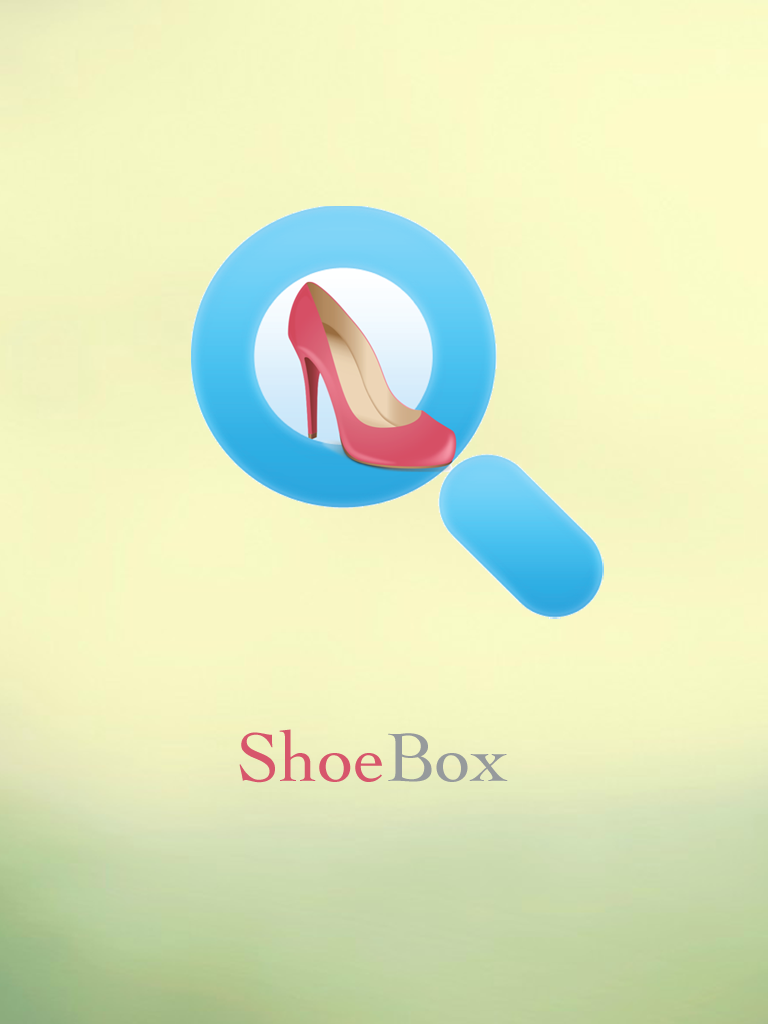
<style>
.page{position:relative;width:768px;height:1024px}
.page>*{position:absolute;margin:0}
.t1{font:72px "Cochin";color:#d7566c}
.t2{font:72px "Cochin";color:#969a9c}
</style>
<div class="page">
<p class="t1" style="left:239px;top:729px;width:269px;height:54px">Shoe<span class="t2">Box</span></p>
</div>
